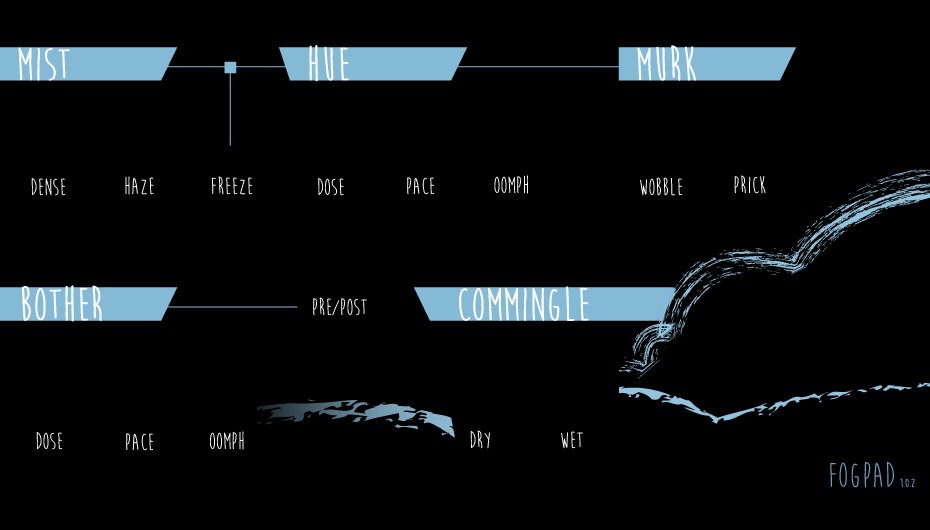
<style>
.page{position:relative;width:930px;height:530px;background:#000000}
.page>*{position:absolute;margin:0}
.t1{font:24px "MoonFlower";color:#ffffff}
.t2{font:36px "MoonFlower";color:#719eb7}
.t3{font:12px "MoonFlower"}
</style>
<div class="page">
<p class="t1" style="left:31px;top:178px;width:35px;height:18px">DENSE</p>
<p class="t1" style="left:125px;top:176px;width:29px;height:19px">HAZE</p>
<p class="t1" style="left:211px;top:176px;width:42px;height:19px">FREEZE</p>
<p class="t1" style="left:318px;top:178px;width:26px;height:18px">DOSE</p>
<p class="t1" style="left:407px;top:177px;width:28px;height:18px">PACE</p>
<p class="t1" style="left:494px;top:175px;width:34px;height:19px">OOMPH</p>
<p class="t1" style="left:640px;top:177px;width:43px;height:19px">WOBBLE</p>
<p class="t1" style="left:734px;top:175px;width:32px;height:19px">PRICK</p>
<p class="t1" style="left:313px;top:297px;width:54px;height:19px">PRE/POST</p>
<p class="t1" style="left:36px;top:432px;width:27px;height:18px">DOSE</p>
<p class="t1" style="left:126px;top:433px;width:28px;height:18px">PACE</p>
<p class="t1" style="left:210px;top:431px;width:34px;height:19px">OOMPH</p>
<p class="t1" style="left:470px;top:430px;width:20px;height:19px">DRY</p>
<p class="t1" style="left:561px;top:431px;width:22px;height:18px">WET</p>
<p class="t2" style="left:830px;top:461px;width:64px;height:27px">FOGPAD</p>
<p class="t3" style="left:900px;top:478px;width:15px;height:10px">1.0.2</p>
</div>
